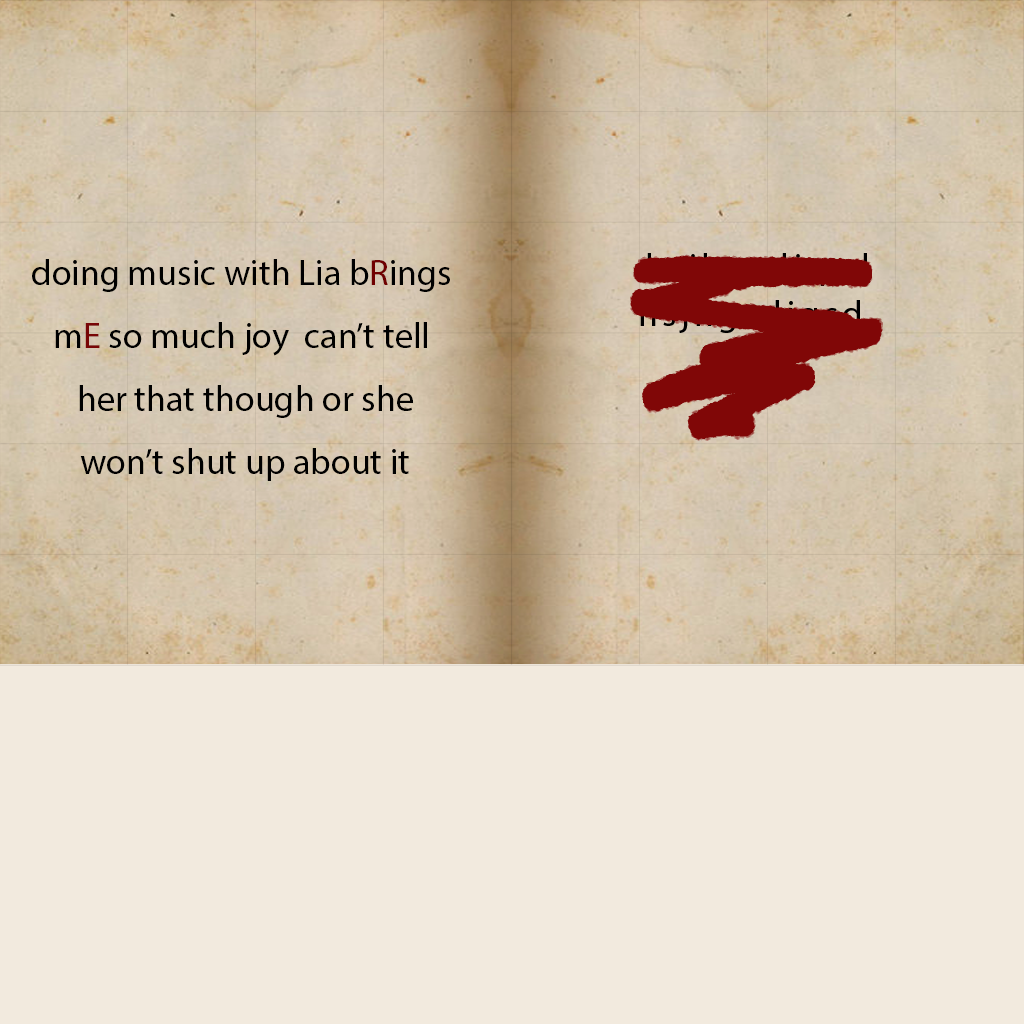
<style>
.page{position:relative;width:1024px;height:1024px;background:#f2eade}
.page>*{position:absolute;margin:0}
.t1{font:36px "MyriadPro-Regular";color:#000000}
.t2{font:36px "MyriadPro-Regular";color:#700000}
.t3{font:36px "MyriadPro-Regular";color:#780606}
</style>
<div class="page">
<p class="t1" style="left:32px;top:259px;width:418px;height:222px;text-align:center">doing music with Lia b<span class="t2">R</span>ings <br>m<span class="t3">E</span> so much joy  can’t tell <br>her that though or she<br>won’t shut up about it</p>
</div>
